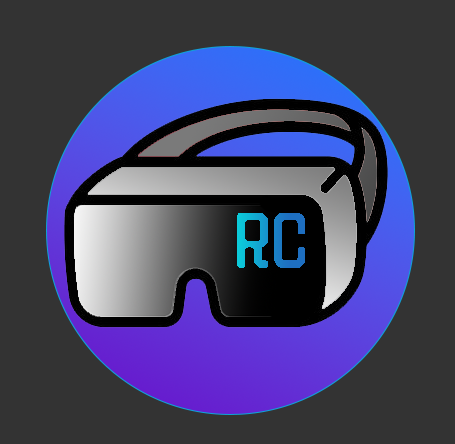
<style>
.page{position:relative;width:455px;height:444px;background:#333333}
.page>*{position:absolute;margin:0}
.t1{font:76px "ZCOOLQingKeHuangYou-Regular"}
</style>
<div class="page">
<p class="t1" style="left:237px;top:213px;width:68px;height:55px">RC</p>
</div>
